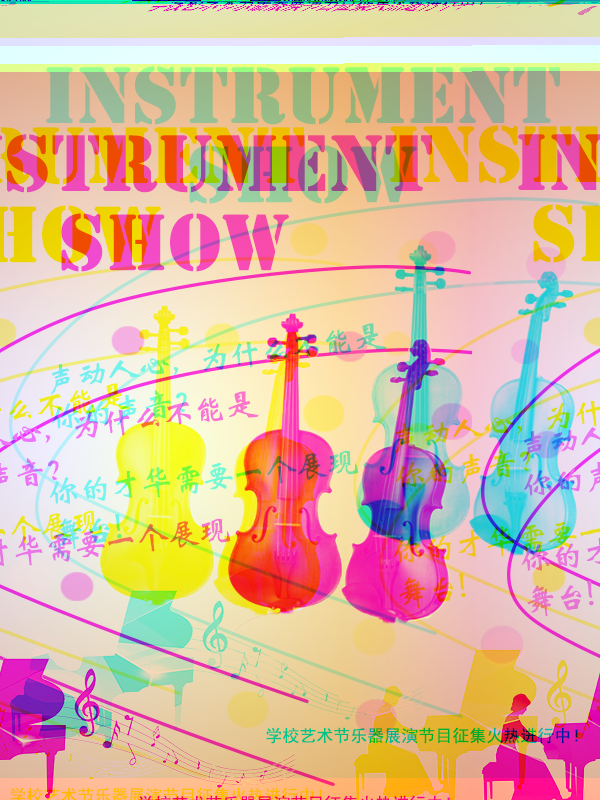
<style>
.page{position:relative;width:600px;height:800px}
.page>*{position:absolute;margin:0}
.t1{font:83.3px/79.2px "Stencil"}
.t2{font:31.4px "STXinwei";letter-spacing:-0.06em;scale:1.06 1}
.t3{font:33.3px/41.7px "STXinwei";letter-spacing:-0.06em}
</style>
<div class="page">
<p class="t1" style="left:46px;top:62px;width:514px;height:138px;text-align:center">INSTRUMENT<br>SHOW</p>
<p class="t2" style="left:50px;top:319px;width:337px;height:106px;rotate:-8deg">声动人心，为什么不能是你的声音？</p>
<p class="t3" style="left:50px;top:446px;width:309px;height:99px;rotate:-6deg">你的才华需要一个展现<br>舞台!</p>
</div>
